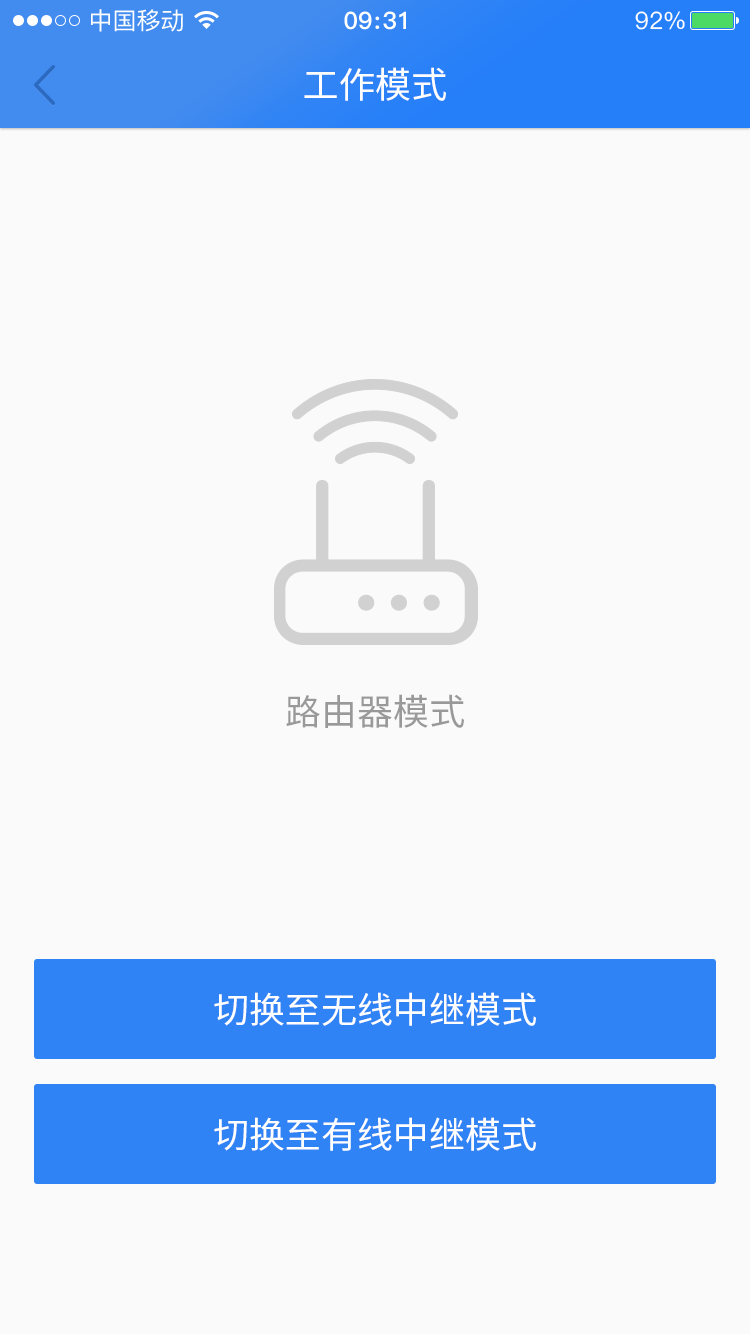
<style>
.page{position:relative;width:750px;height:1334px;background:#fafafa}
.page>*{position:absolute;margin:0}
.t1{font:36px "SourceHanSansCN-Regular";color:#ffffff}
.t2{font:36px "SourceHanSansCN-Regular";color:#999999}
</style>
<div class="page">
<p class="t1" style="left:304px;top:67px;width:142px;height:34px">工作模式</p>
<p class="t2" style="left:286px;top:694px;width:178px;height:34px">路由器模式</p>
<p class="t1" style="left:214px;top:992px;width:322px;height:34px">切换至无线中继模式</p>
<p class="t1" style="left:214px;top:1117px;width:322px;height:34px">切换至有线中继模式</p>
</div>
